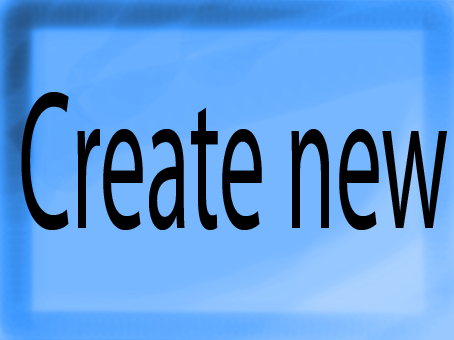
<style>
.page{position:relative;width:454px;height:340px;background:#76b7ff}
.page>*{position:absolute;margin:0}
.t1{font:199.5px "MyriadPro-Regular";color:#000000;scale:0.46 1}
</style>
<div class="page">
<p class="t1" style="left:21px;top:92px;width:426px;height:138px">Create new</p>
</div>
